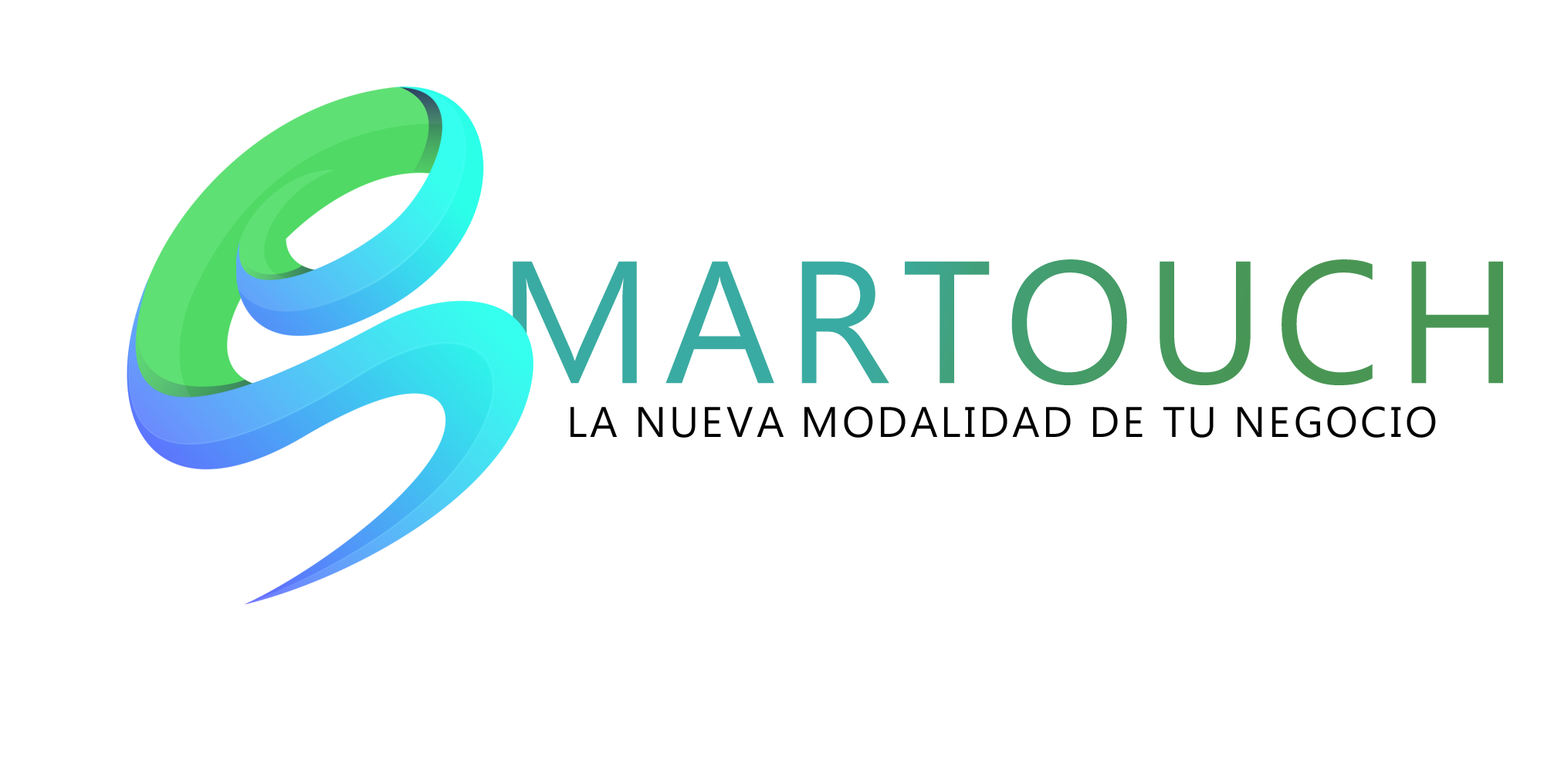
<style>
.page{position:relative;width:1544px;height:772px;background:#ffffff}
.page>*{position:absolute;margin:0}
.t1{font:173.5px "Ebrima";letter-spacing:0.07em}
.t2{font:42.9px "Ebrima";letter-spacing:0.07em;color:#000000}
</style>
<div class="page">
<p class="t1" style="left:513px;top:259px;width:990px;height:126px">MARTOUCH</p>
<p class="t2" style="left:571px;top:406px;width:865px;height:32px">LA NUEVA MODALIDAD DE TU NEGOCIO</p>
</div>
